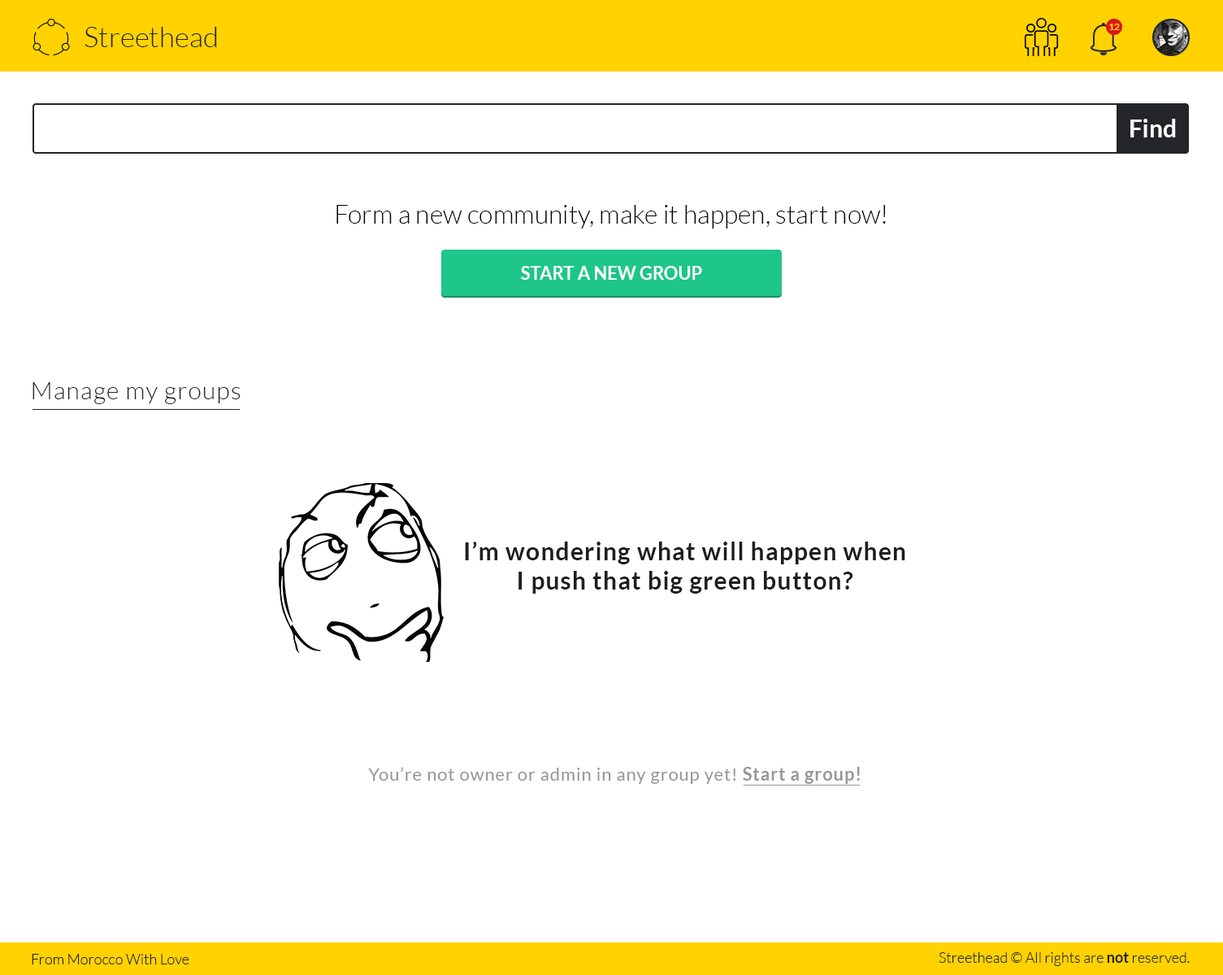
<style>
.page{position:relative;width:1223px;height:975px;background:#ffffff}
.page>*{position:absolute;margin:0}
.t1{font:28.5px "Lato-Light";color:#242528}
.t2{font:9.8px "Lato-Bold";color:#ffd200}
.t3{font:24.4px "Lato-Bold";color:#fcfcfc}
.t4{font:26px "Lato-Light";color:#000000}
.t5{font:17.9px "Lato-Bold";color:#ffffff}
.t6{font:24.4px "Lato-Light";letter-spacing:0.04em;color:#242528}
.t7{font:24.4px "Lato-Bold";letter-spacing:0.04em;color:#1d1e20}
.t8{font:17.9px "Lato-Regular";letter-spacing:0.04em;color:#95979b}
.t9{font:17.9px "Lato-Bold";letter-spacing:0.04em;color:#95979b}
.t10{font:14.6px "Lato-Light";color:#242528}
.t11{font:14.6px "Lato-Bold";color:#242528}
</style>
<div class="page">
<p class="t1" style="left:85px;top:27px;width:132px;height:20px">Streethead</p>
<p class="t2" style="left:1110px;top:24px;width:10px;height:6px">12</p>
<p class="t3" style="left:1131px;top:119px;width:45px;height:18px">Find</p>
<p class="t4" style="left:337px;top:205px;width:549px;height:23px">Form a new community, make it happen, start now!</p>
<p class="t5" style="left:521px;top:266px;width:181px;height:14px">START A NEW GROUP</p>
<p class="t6" style="left:33px;top:382px;width:208px;height:22px">Manage my groups</p>
<p class="t7" style="left:465px;top:541px;width:441px;height:52px;text-align:center">I’m wondering what will happen when<br>I push that big green button?</p>
<p class="t8" style="left:368px;top:767px;width:492px;height:17px">You’re not owner or admin in any group yet! <span class="t9">Start a group!</span></p>
<p class="t10" style="left:32px;top:954px;width:157px;height:10px">From Morocco With Love</p>
<p class="t10" style="left:939px;top:952px;width:251px;height:14px">Streethead © All rights are <span class="t11">not </span>reserved.</p>
</div>
